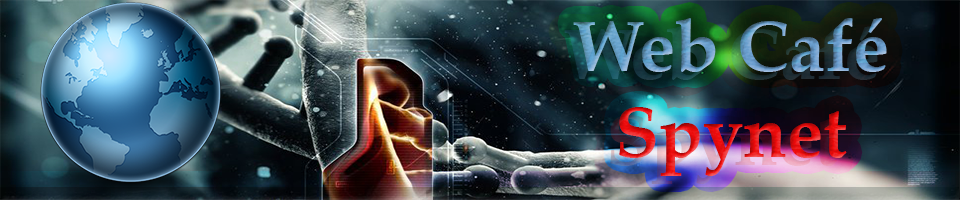
<style>
.page{position:relative;width:960px;height:200px}
.page>*{position:absolute;margin:0}
.t1{font:72px "PalatinoLinotype-Bold"}
</style>
<div class="page">
<p class="t1" style="left:573px;top:18px;width:314px;height:158px;text-align:center">Web Café<br>Spynet</p>
</div>
